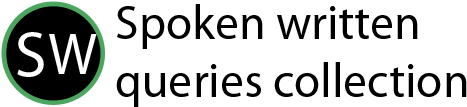
<style>
.page{position:relative;width:467px;height:107px;background:#ffffff}
.page>*{position:absolute;margin:0}
.t1{font:48px "MyriadPro-Regular";color:#000000}
.t2{font:64.1px "MyriadPro-Regular";color:#ffffff}
.t3{font:57.7px "MyriadPro-Regular";color:#ffffff}
</style>
<div class="page">
<p class="t1" style="left:116px;top:4px;width:351px;height:103px">Spoken written <br>queries collection</p>
<p class="t2" style="left:17px;top:32px;width:27px;height:45px">S</p>
<p class="t3" style="left:49px;top:34px;width:48px;height:40px">W</p>
</div>
